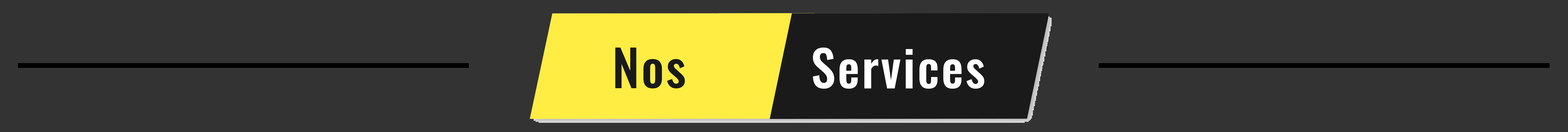
<style>
.page{position:relative;width:1568px;height:132px;background:#333333}
.page>*{position:absolute;margin:0}
.t1{font:49.8px "Oswald-Medium";letter-spacing:0.04em;color:#1a1a1a}
.t2{font:49.8px "Oswald-Medium";letter-spacing:0.04em;color:#ffffff}
</style>
<div class="page">
<p class="t1" style="left:615px;top:47px;width:70px;height:41px">Nos</p>
<p class="t2" style="left:813px;top:47px;width:171px;height:42px">Services</p>
</div>
